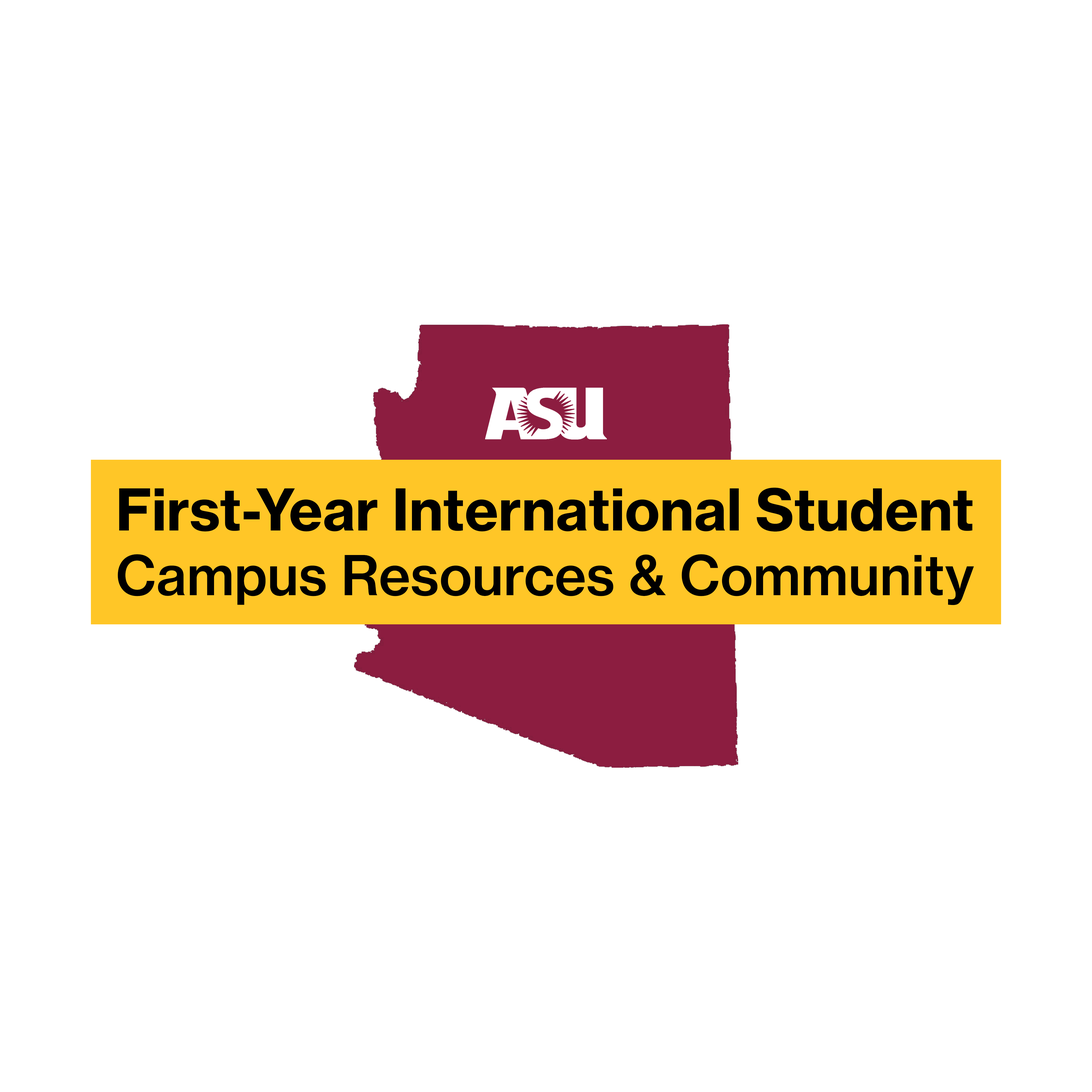
<style>
.page{position:relative;width:1092px;height:1092px;background:#ffffff}
.page>*{position:absolute;margin:0}
.t1{font:56.5px "NHaasGroteskTXPro-75Bd";color:#000000}
.t2{font:53.9px "NHaasGroteskTXPro-65Md";color:#000000}
</style>
<div class="page">
<p class="t1" style="left:118px;top:488px;width:856px;height:117px;text-align:center">First-Year International Student<br><span class="t2">Campus Resources &amp; Community</span></p>
</div>
